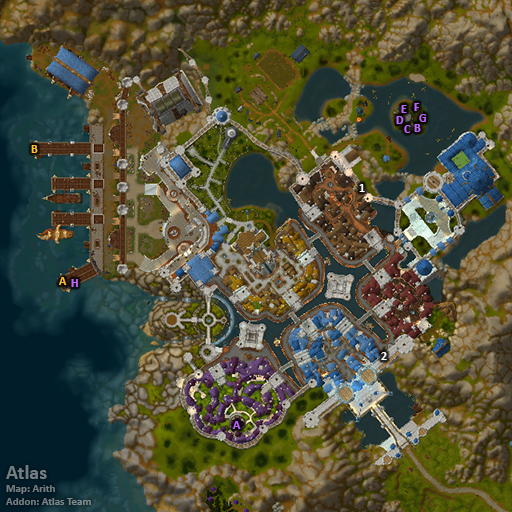
<style>
.page{position:relative;width:512px;height:512px}
.page>*{position:absolute;margin:0}
.t1{font:12px "Calibri-Bold";color:#bb66ff}
.t2{font:12px "Calibri-Bold";color:#ffbf28}
.t3{font:12px "Calibri-Bold";color:#ffffff}
.t4{font:11px "Calibri-Bold";color:#747d81}
.t5{font:20px "Calibri-Bold";color:#747d81}
</style>
<div class="page">
<p class="t1" style="left:401px;top:105px;width:6px;height:8px">E</p>
<p class="t1" style="left:414px;top:103px;width:6px;height:8px">F</p>
<p class="t1" style="left:396px;top:116px;width:8px;height:8px">D</p>
<p class="t1" style="left:404px;top:125px;width:7px;height:8px">C</p>
<p class="t1" style="left:414px;top:124px;width:7px;height:8px">B</p>
<p class="t1" style="left:419px;top:114px;width:7px;height:8px">G</p>
<p class="t2" style="left:31px;top:145px;width:7px;height:8px">B</p>
<p class="t3" style="left:359px;top:184px;width:6px;height:8px">1</p>
<p class="t2" style="left:59px;top:277px;width:8px;height:8px">A</p>
<p class="t1" style="left:71px;top:279px;width:7px;height:8px">H</p>
<p class="t3" style="left:381px;top:352px;width:6px;height:8px">2</p>
<p class="t1" style="left:233px;top:421px;width:8px;height:8px">A</p>
<p class="t4" style="left:6px;top:465px;width:85px;height:40px"><span class="t5">Atlas<br></span>Map: Arith<br>Addon: Atlas Team</p>
</div>
